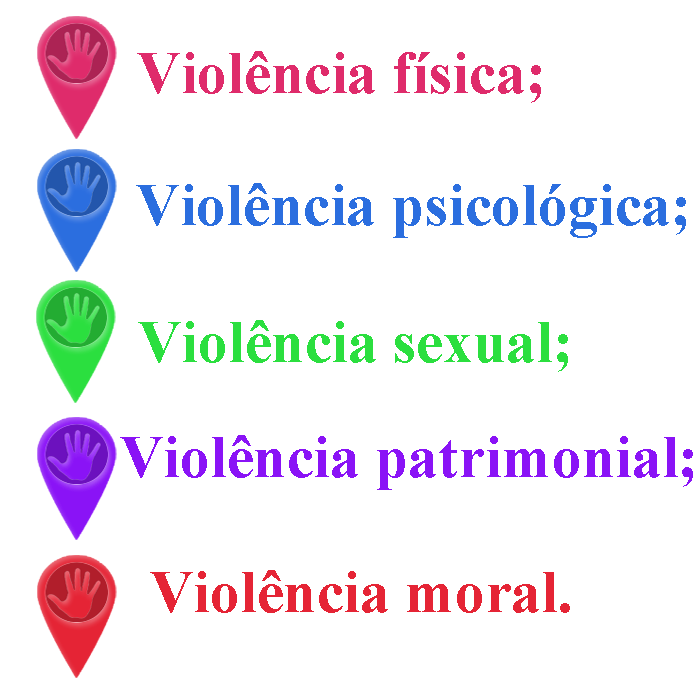
<style>
.page{position:relative;width:700px;height:700px;background:#ffffff}
.page>*{position:absolute;margin:0}
.t1{font:60px "TimesNewRomanPS-BoldMT";color:#df2b6b}
.t2{font:60px "TimesNewRomanPS-BoldMT";color:#2b6edf}
.t3{font:60px "TimesNewRomanPS-BoldMT";color:#2bdf3f}
.t4{font:60px "TimesNewRomanPS-BoldMT";color:#8a13f6}
.t5{font:60px "TimesNewRomanPS-BoldMT";color:#e52435}
</style>
<div class="page">
<p class="t1" style="left:137px;top:51px;width:404px;height:52px">Violência física;</p>
<p class="t2" style="left:136px;top:183px;width:550px;height:55px">Violência psicológica;</p>
<p class="t3" style="left:138px;top:320px;width:430px;height:52px">Violência sexual;</p>
<p class="t4" style="left:120px;top:435px;width:573px;height:55px">Violência patrimonial;</p>
<p class="t5" style="left:150px;top:570px;width:420px;height:43px">Violência moral.</p>
</div>
